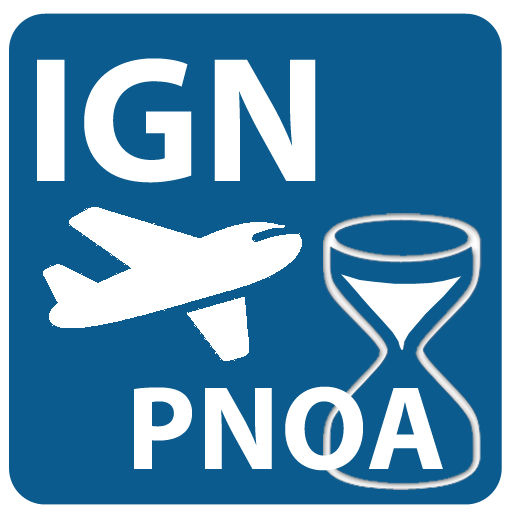
<style>
.page{position:relative;width:512px;height:512px;background:#0b5b8e}
.page>*{position:absolute;margin:0}
.t1{font:180px "MyriadPro-Bold";letter-spacing:0.01em;color:#ffffff}
.t2{font:120px "MyriadPro-Bold";letter-spacing:0.01em;color:#ffffff}
</style>
<div class="page">
<p class="t1" style="left:37px;top:58px;width:279px;height:125px">IGN</p>
<p class="t2" style="left:134px;top:386px;width:309px;height:85px">PNOA</p>
</div>
